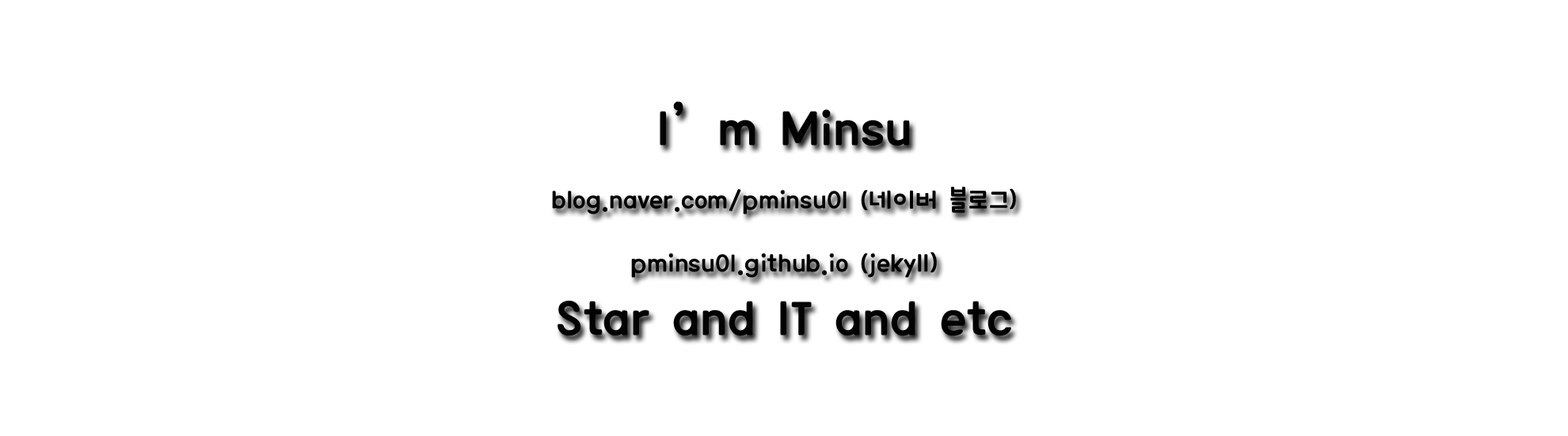
<style>
.page{position:relative;width:1568px;height:436px;background:#ffffff}
.page>*{position:absolute;margin:0}
.t1{font:28.5px/63.4px "KoreanBBOD-R";color:#020202}
.t2{font:55.4px/63.4px "KoreanBBOD-R";color:#020202}
</style>
<div class="page">
<p class="t1" style="left:552px;top:101px;width:464px;height:236px;text-align:center"><span class="t2">I’m Minsu<br></span>blog.naver.com/pminsu01 (네이버 블로그)<br>pminsu01.github.io (jekyll)<br><span class="t2">Star and IT and etc</span></p>
</div>
